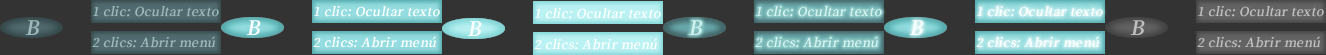
<style>
.page{position:relative;width:1326px;height:55px;background:#333333}
.page>*{position:absolute;margin:0}
.t1{font:15px "OfficialFateFont-Medium";color:#9eb9ba;font-weight:bold;font-style:italic}
.t2{font:15px "OfficialFateFont-Medium";color:#fafefe;font-weight:bold;font-style:italic}
.t3{font:15px "OfficialFateFont-Medium";color:#d4f4f1;font-weight:bold;font-style:italic}
.t4{font:15px "OfficialFateFont-Medium";color:#fcfffe;font-weight:bold;font-style:italic}
.t5{font:15px "OfficialFateFont-Medium";color:#bfbfbf;font-weight:bold;font-style:italic}
.t6{font:24px "OfficialFateFont-Medium";color:#9eb9ba;font-weight:bold;font-style:italic}
.t7{font:24px "OfficialFateFont-Medium";color:#fafefe;font-weight:bold;font-style:italic}
.t8{font:24px "OfficialFateFont-Medium";color:#cff2ef;font-weight:bold;font-style:italic}
.t9{font:24px "OfficialFateFont-Medium";color:#f5fefd;font-weight:bold;font-style:italic}
.t10{font:24px "OfficialFateFont-Medium";color:#bfbfbf;font-weight:bold;font-style:italic}
</style>
<div class="page">
<p class="t1" style="left:92px;top:5px;width:127px;height:12px">1 clic: Ocultar texto</p>
<p class="t2" style="left:313px;top:5px;width:127px;height:12px">1 clic: Ocultar texto</p>
<p class="t3" style="left:755px;top:5px;width:127px;height:12px">1 clic: Ocultar texto</p>
<p class="t4" style="left:976px;top:5px;width:127px;height:12px">1 clic: Ocultar texto</p>
<p class="t5" style="left:1197px;top:5px;width:127px;height:12px">1 clic: Ocultar texto</p>
<p class="t4" style="left:534px;top:7px;width:127px;height:12px">1 clic: Ocultar texto</p>
<p class="t6" style="left:25px;top:20px;width:15px;height:15px">B</p>
<p class="t7" style="left:246px;top:20px;width:15px;height:15px">B</p>
<p class="t7" style="left:467px;top:21px;width:15px;height:15px">B</p>
<p class="t8" style="left:688px;top:20px;width:15px;height:15px">B</p>
<p class="t9" style="left:909px;top:20px;width:15px;height:15px">B</p>
<p class="t10" style="left:1130px;top:20px;width:15px;height:15px">B</p>
<p class="t1" style="left:92px;top:36px;width:124px;height:12px">2 clics: Abrir menú</p>
<p class="t2" style="left:313px;top:36px;width:124px;height:12px">2 clics: Abrir menú</p>
<p class="t4" style="left:534px;top:38px;width:124px;height:12px">2 clics: Abrir menú</p>
<p class="t3" style="left:755px;top:36px;width:124px;height:12px">2 clics: Abrir menú</p>
<p class="t4" style="left:976px;top:36px;width:124px;height:12px">2 clics: Abrir menú</p>
<p class="t5" style="left:1197px;top:36px;width:124px;height:12px">2 clics: Abrir menú</p>
</div>
